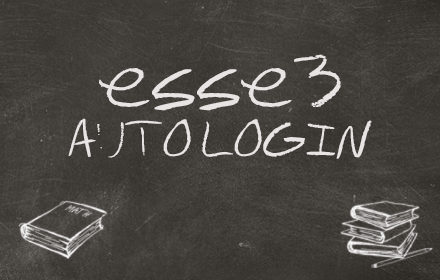
<style>
.page{position:relative;width:440px;height:280px}
.page>*{position:absolute;margin:0}
.t1{font:36px "chalkboard";color:#e9e4e4;font-weight:bold}
.t2{font:24px "chalkboard";color:#e9e4e4;text-transform:uppercase;font-weight:bold}
</style>
<div class="page">
<p class="t1" style="left:99px;top:54px;width:242px;height:57px">esse3</p>
<p class="t2" style="left:68px;top:118px;width:304px;height:41px">auto login</p>
</div>
